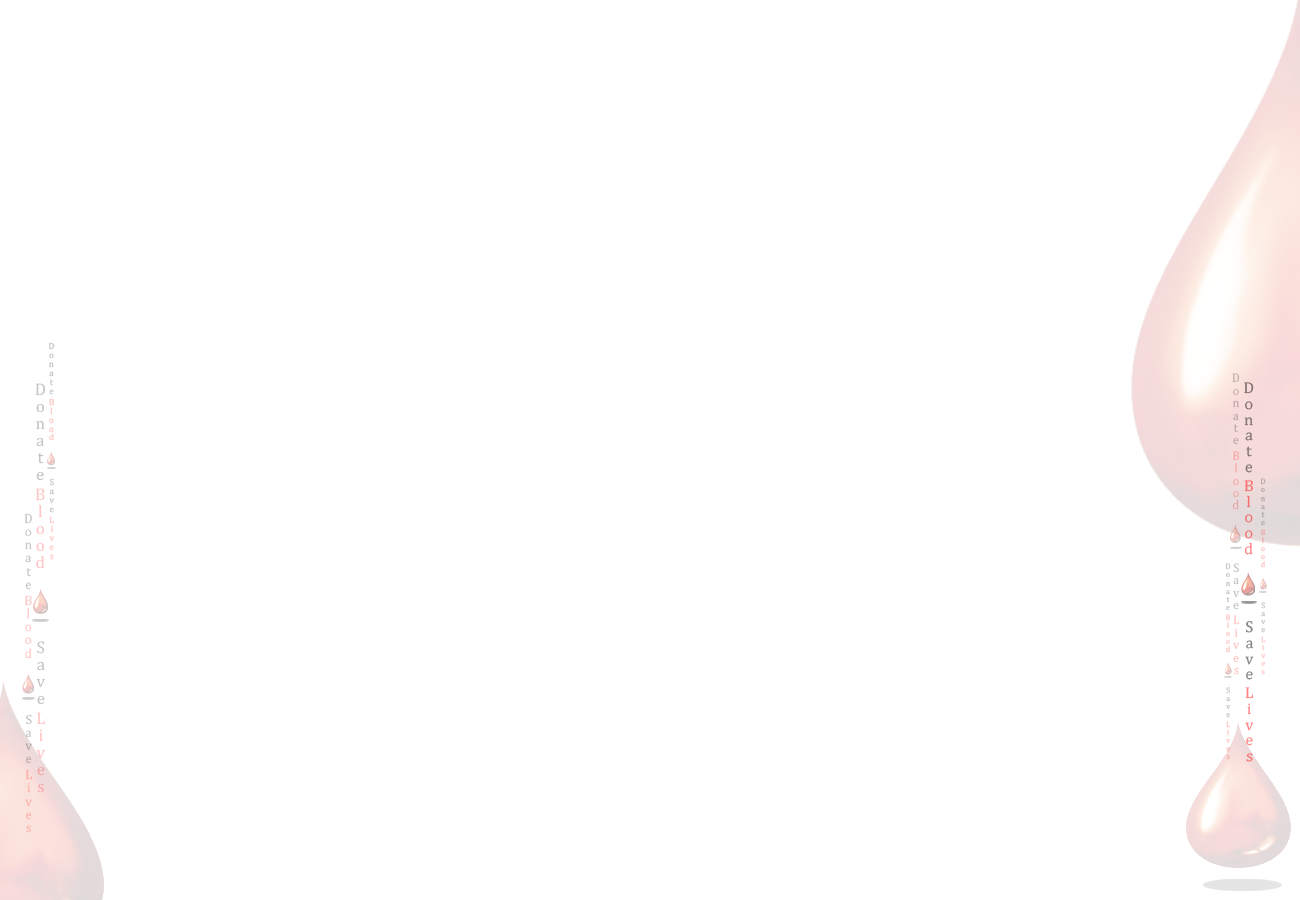
<style>
.page{position:relative;width:1300px;height:900px;background:#ffffff}
.page>*{position:absolute;margin:0}
.t1{font:9px "Cambria";color:#c5c5c5}
.t2{font:12.4px "Cambria";color:#eba9a8;scale:0.96 1}
.t3{font:16.9px "Cambria"}
.t4{font:15.7px "Cambria"}
.t5{font:9px "Cambria"}
.t6{font:8.1px "Cambria"}
.t7{font:13.2px "Cambria"}
.t8{font:12.4px "Cambria";color:#c5c5c5;scale:0.96 1}
.t9{font:13.2px "Cambria";color:#fbada9}
</style>
<div class="page">
<p class="t1" style="left:49px;top:342px;width:6px;height:99px">Donate Blood</p>
<p class="t2" style="left:1232px;top:373px;width:8px;height:137px">Donate Blood</p>
<p class="t3" style="left:35px;top:383px;width:11px;height:186px">Donate Blood</p>
<p class="t4" style="left:1244px;top:382px;width:10px;height:173px">Donate Blood</p>
<p class="t5" style="left:49px;top:478px;width:5px;height:82px">Save Lives</p>
<p class="t6" style="left:1260px;top:478px;width:6px;height:90px">Donate Blood</p>
<p class="t7" style="left:24px;top:513px;width:8px;height:146px">Donate Blood</p>
<p class="t6" style="left:1225px;top:563px;width:6px;height:90px">Donate Blood</p>
<p class="t8" style="left:1233px;top:563px;width:7px;height:112px">Save Lives</p>
<p class="t6" style="left:1261px;top:602px;width:5px;height:73px">Save Lives</p>
<p class="t4" style="left:1245px;top:621px;width:9px;height:141px">Save Lives</p>
<p class="t3" style="left:36px;top:641px;width:9px;height:152px">Save Lives</p>
<p class="t6" style="left:1226px;top:687px;width:5px;height:73px">Save Lives</p>
<p class="t9" style="left:25px;top:714px;width:8px;height:119px">Save Lives</p>
</div>
